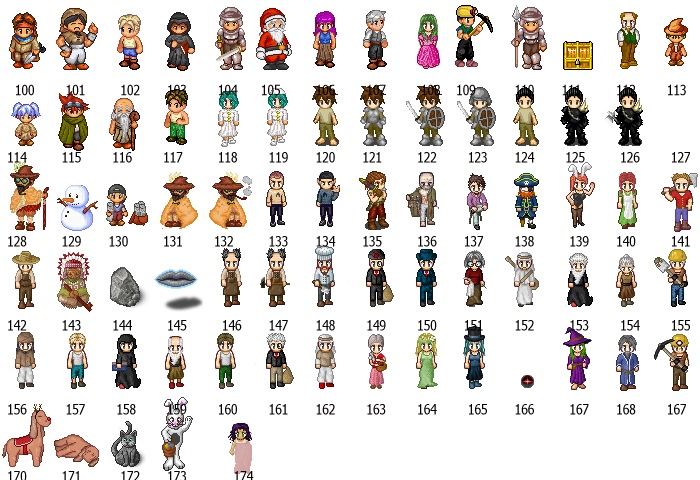
<style>
.page{position:relative;width:700px;height:480px;background:#ffffff}
.page>*{position:absolute;margin:0}
.t1{font:14px "Nina";color:#070101}
</style>
<div class="page">
<p class="t1" style="left:8px;top:84px;width:682px;height:398px">100        101         102       103        104      105         106        107         108    109          110       111         112        113<br><br><br><br>114         115        116        117         118        119       120       121         122        123       124        125         126        127<br><br><br><br><br>128         129       130         131        132         133       134       135         136       137        138         139       140         141<br><br><br><br><br>142         143        144         145         146       147       148        149        150       151        152         153        154        155<br><br><br><br><br>156          157        158        159        160        161       162        163        164        165       166         167       168        167<br><br><br><br>170         171          172       173            174</p>
</div>
